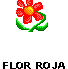
<style>
.page{position:relative;width:68px;height:69px;background:#ffffff}
.page>*{position:absolute;margin:0}
.t1{font:10.3px "Arial-BoldMT";color:#000000;scale:1.11 1}
</style>
<div class="page">
<p class="t1" style="left:3px;top:62px;width:62px;height:7px">FLOR ROJA</p>
</div>
